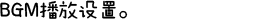
<style>
.page{position:relative;width:269px;height:19px;background:#ffffff}
.page>*{position:absolute;margin:0}
.t1{font:22px "¢è?";color:#000000}
</style>
<div class="page">
<p class="t1" style="left:0px;top:0px;width:128px;height:19px">BGM播放设置。</p>
</div>
